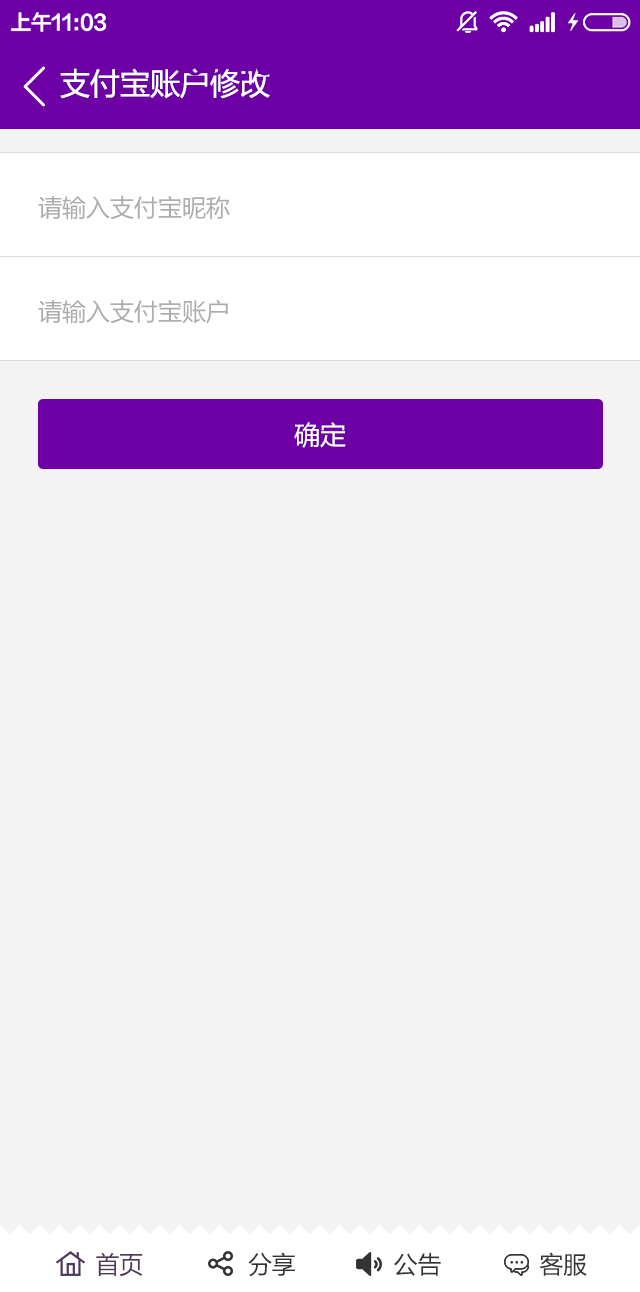
<style>
.page{position:relative;width:640px;height:1292px;background:#f3f3f3}
.page>*{position:absolute;margin:0}
.t1{font:30px "MicrosoftYaHei";color:#ffffff}
.t2{font:24px/52px "MicrosoftYaHei";color:#adadad}
.t3{font:26px "MicrosoftYaHei";color:#ffffff}
.t4{font:24px "MicrosoftYaHei";color:#333333}
.t5{font:24px "MicrosoftYaHei";color:#50385b}
</style>
<div class="page">
<p class="t1" style="left:60px;top:68px;width:210px;height:31px">支付宝账户修改</p>
<p class="t2" style="left:38px;top:195px;width:192px;height:129px">请输入支付宝昵称<br><br>请输入支付宝账户</p>
<p class="t3" style="left:294px;top:422px;width:52px;height:26px">确定</p>
<p class="t4" style="left:96px;top:1252px;width:491px;height:25px"><span class="t5">首页</span>               分享              公告              客服</p>
</div>
